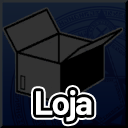
<style>
.page{position:relative;width:128px;height:128px}
.page>*{position:absolute;margin:0}
.t1{font:33.3px "Barlow-Bold";letter-spacing:-0.05em;color:#ffffff}
</style>
<div class="page">
<p class="t1" style="left:36px;top:90px;width:56px;height:32px">Loja</p>
</div>
